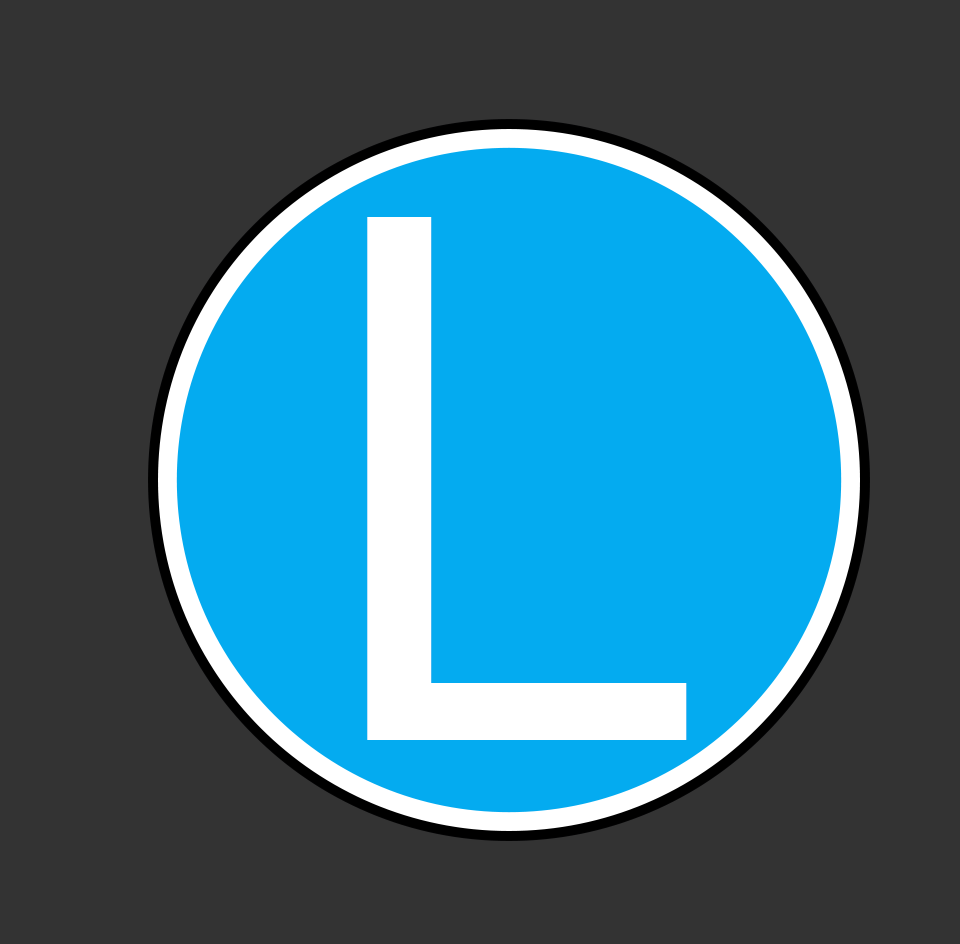
<style>
.page{position:relative;width:960px;height:944px;background:#333333}
.page>*{position:absolute;margin:0}
.t1{font:800px "Corbel";color:#ffffff}
</style>
<div class="page">
<p class="t1" style="left:367px;top:217px;width:320px;height:523px">L</p>
</div>
